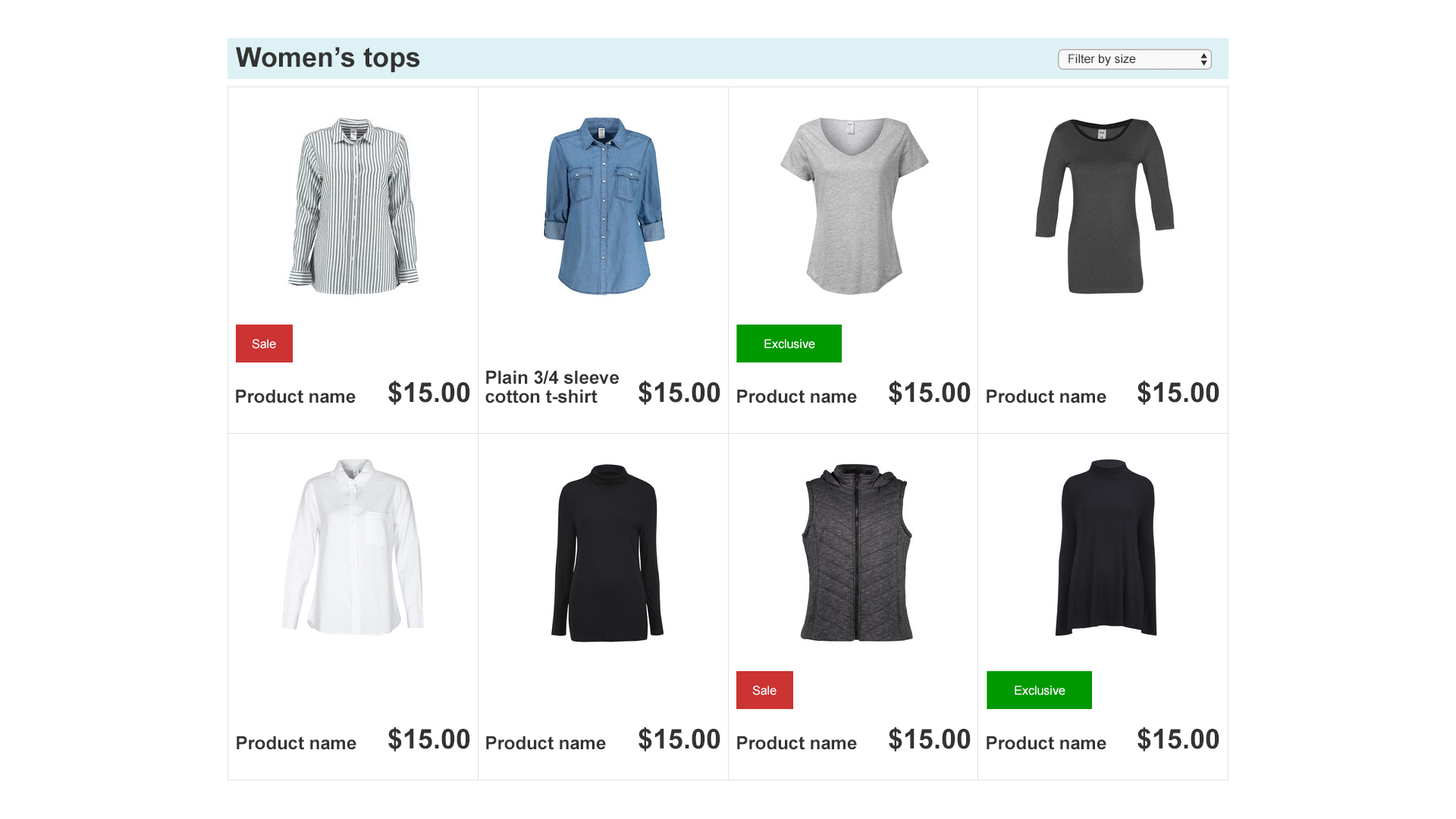
<style>
.page{position:relative;width:1456px;height:819px;background:#ffffff}
.page>*{position:absolute;margin:0}
.t1{font:27.3px "Arial-BoldMT";color:#333333}
.t2{font:12.1px "ArialMT";color:#333333}
.t3{font:12.1px "ArialMT";color:#ffffff}
.t4{font:18.2px/19px "Arial-BoldMT";color:#333333}
.t5{font:18.2px "Arial-BoldMT";color:#333333}
</style>
<div class="page">
<p class="t1" style="left:236px;top:47px;width:184px;height:26px">Women’s tops</p>
<p class="t2" style="left:1068px;top:54px;width:68px;height:12px">Filter by size</p>
<p class="t3" style="left:252px;top:339px;width:24px;height:10px">Sale</p>
<p class="t3" style="left:764px;top:339px;width:51px;height:10px">Exclusive</p>
<p class="t4" style="left:485px;top:370px;width:134px;height:33px">Plain 3/4 sleeve <br>cotton t-shirt</p>
<p class="t5" style="left:236px;top:389px;width:120px;height:14px">Product name</p>
<p class="t1" style="left:388px;top:381px;width:82px;height:24px">$15.00</p>
<p class="t1" style="left:639px;top:381px;width:81px;height:24px">$15.00</p>
<p class="t5" style="left:737px;top:389px;width:120px;height:14px">Product name</p>
<p class="t1" style="left:889px;top:381px;width:82px;height:24px">$15.00</p>
<p class="t5" style="left:987px;top:389px;width:119px;height:14px">Product name</p>
<p class="t1" style="left:1137px;top:381px;width:82px;height:24px">$15.00</p>
<p class="t3" style="left:752px;top:686px;width:25px;height:9px">Sale</p>
<p class="t3" style="left:1015px;top:686px;width:50px;height:9px">Exclusive</p>
<p class="t5" style="left:237px;top:736px;width:119px;height:14px">Product name</p>
<p class="t1" style="left:388px;top:727px;width:82px;height:24px">$15.00</p>
<p class="t5" style="left:486px;top:736px;width:120px;height:14px">Product name</p>
<p class="t1" style="left:639px;top:727px;width:81px;height:24px">$15.00</p>
<p class="t5" style="left:737px;top:736px;width:120px;height:14px">Product name</p>
<p class="t1" style="left:889px;top:727px;width:82px;height:24px">$15.00</p>
<p class="t5" style="left:987px;top:736px;width:119px;height:14px">Product name</p>
<p class="t1" style="left:1137px;top:727px;width:82px;height:24px">$15.00</p>
</div>
